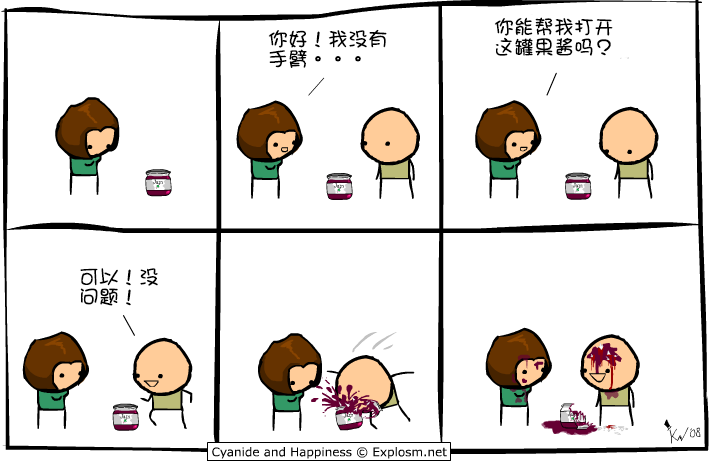
<style>
.page{position:relative;width:709px;height:462px;background:#ffffff}
.page>*{position:absolute;margin:0}
.t1{font:20px/20px "DFGirl";color:#000000}
</style>
<div class="page">
<p class="t1" style="left:494px;top:17px;width:119px;height:39px">你能帮我打开<br>这罐果酱吗？</p>
<p class="t1" style="left:268px;top:29px;width:119px;height:39px">你好！我没有<br>手臂。。。</p>
<p class="t1" style="left:80px;top:268px;width:78px;height:38px">可以！没<br>问题！</p>
</div>
